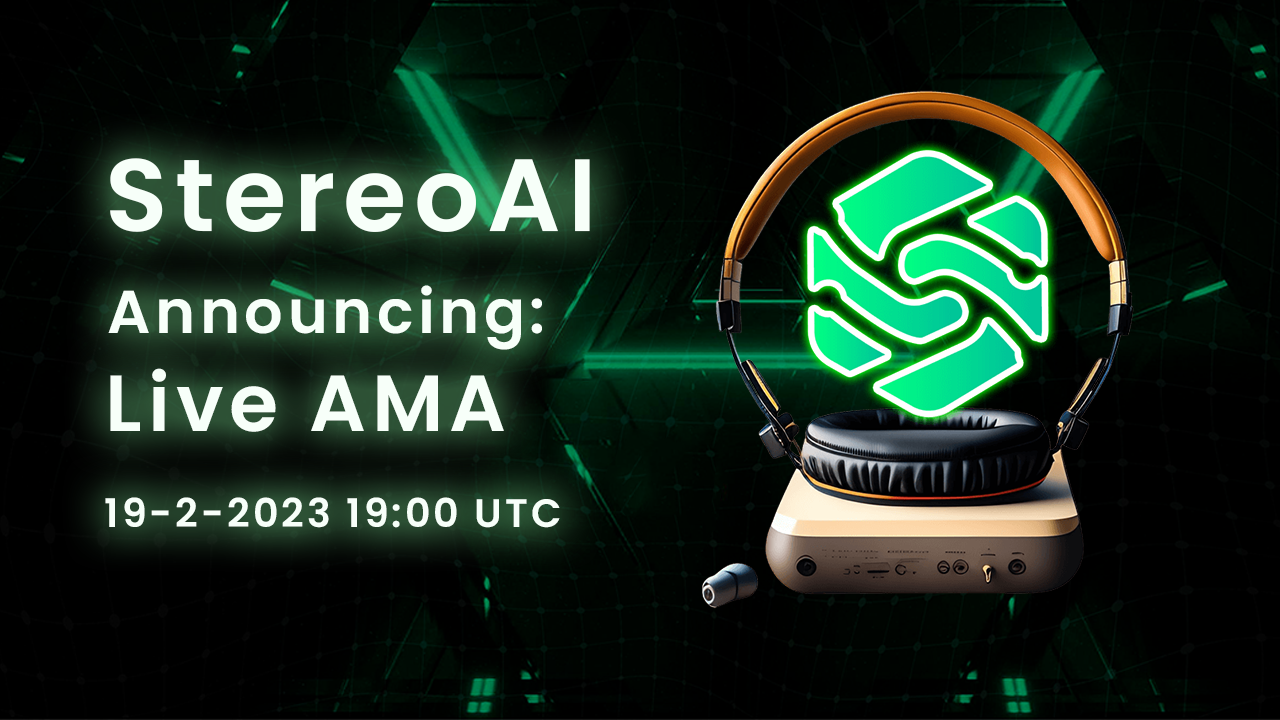
<style>
.page{position:relative;width:1280px;height:720px}
.page>*{position:absolute;margin:0}
.t1{font:102.6px "Poppins-SemiBold";letter-spacing:0.075em;color:#f7fff9}
.t2{font:60.6px "Poppins-SemiBold";letter-spacing:0.075em;color:#f7fff9}
.t3{font:79.4px "Poppins-SemiBold";letter-spacing:0.075em;color:#f7fff9}
.t4{font:39.6px "Poppins-SemiBold";letter-spacing:0.075em;color:#f7fff9}
</style>
<div class="page">
<p class="t1" style="left:110px;top:158px;width:480px;height:74px">StereoAI</p>
<p class="t2" style="left:108px;top:285px;width:434px;height:65px">Announcing:</p>
<p class="t3" style="left:110px;top:368px;width:394px;height:64px">Live AMA</p>
<p class="t4" style="left:105px;top:497px;width:455px;height:31px">19-2-2023 19:00 UTC</p>
</div>
